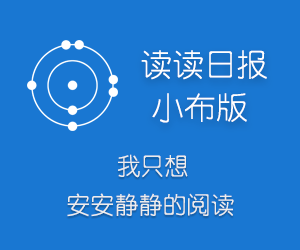
<style>
.page{position:relative;width:300px;height:250px;background:#1977d2}
.page>*{position:absolute;margin:0}
.t1{font:32px "YouYuan";color:#ffffff}
.t2{font:24px "YouYuan";color:#ededed}
</style>
<div class="page">
<p class="t1" style="left:141px;top:50px;width:126px;height:30px">读读日报</p>
<p class="t1" style="left:152px;top:93px;width:95px;height:30px">小布版</p>
<p class="t2" style="left:118px;top:154px;width:70px;height:24px">我只想</p>
<p class="t2" style="left:67px;top:193px;width:167px;height:24px">安安静静的阅读</p>
</div>
